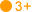
<style>
.page{position:relative;width:36px;height:12px;background:#ffffff}
.page>*{position:absolute;margin:0}
.t1{font:14px "ArialMT";letter-spacing:0.05em;color:#ff9900}
</style>
<div class="page">
<p class="t1" style="left:15px;top:1px;width:16px;height:10px">3+</p>
</div>
